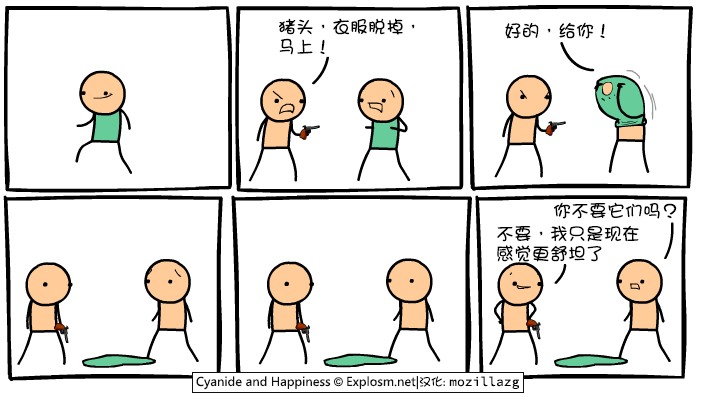
<style>
.page{position:relative;width:720px;height:400px;background:#ffffff}
.page>*{position:absolute;margin:0}
.t1{font:18px/20px "DFGirl";color:#000000}
.t2{font:18px "DFGirl";color:#000000}
</style>
<div class="page">
<p class="t1" style="left:279px;top:18px;width:136px;height:37px">猪头，衣服脱掉，<br>马上！</p>
<p class="t2" style="left:505px;top:22px;width:100px;height:17px">好的，给你！</p>
<p class="t2" style="left:553px;top:202px;width:124px;height:17px">你不要它们吗？</p>
<p class="t1" style="left:497px;top:225px;width:142px;height:37px">不要，我只是现在<br>感觉更舒坦了</p>
</div>
